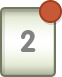
<style>
.page{position:relative;width:62px;height:77px}
.page>*{position:absolute;margin:0}
.t1{font:30px "RotondaC-Bold";letter-spacing:0.04em;color:#828282;text-transform:uppercase}
</style>
<div class="page">
<p class="t1" style="left:20px;top:30px;width:16px;height:22px">2</p>
</div>
